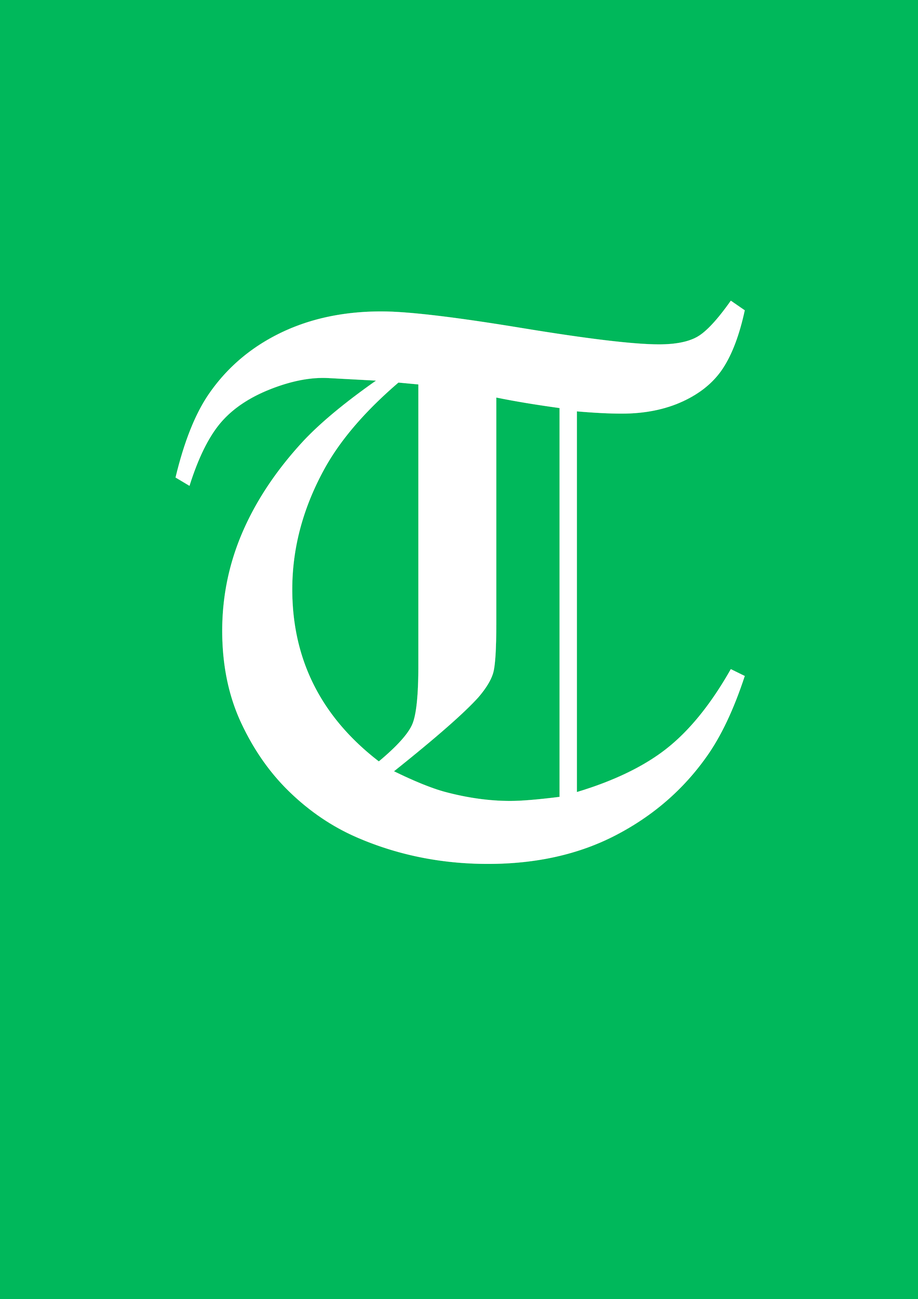
<style>
.page{position:relative;width:918px;height:1299px;background:#00b85b}
.page>*{position:absolute;margin:0}
.t1{font:771.3px "OldEnglishTextMT";color:#ffffff}
</style>
<div class="page">
<p class="t1" style="left:175px;top:301px;width:570px;height:563px">T</p>
</div>
